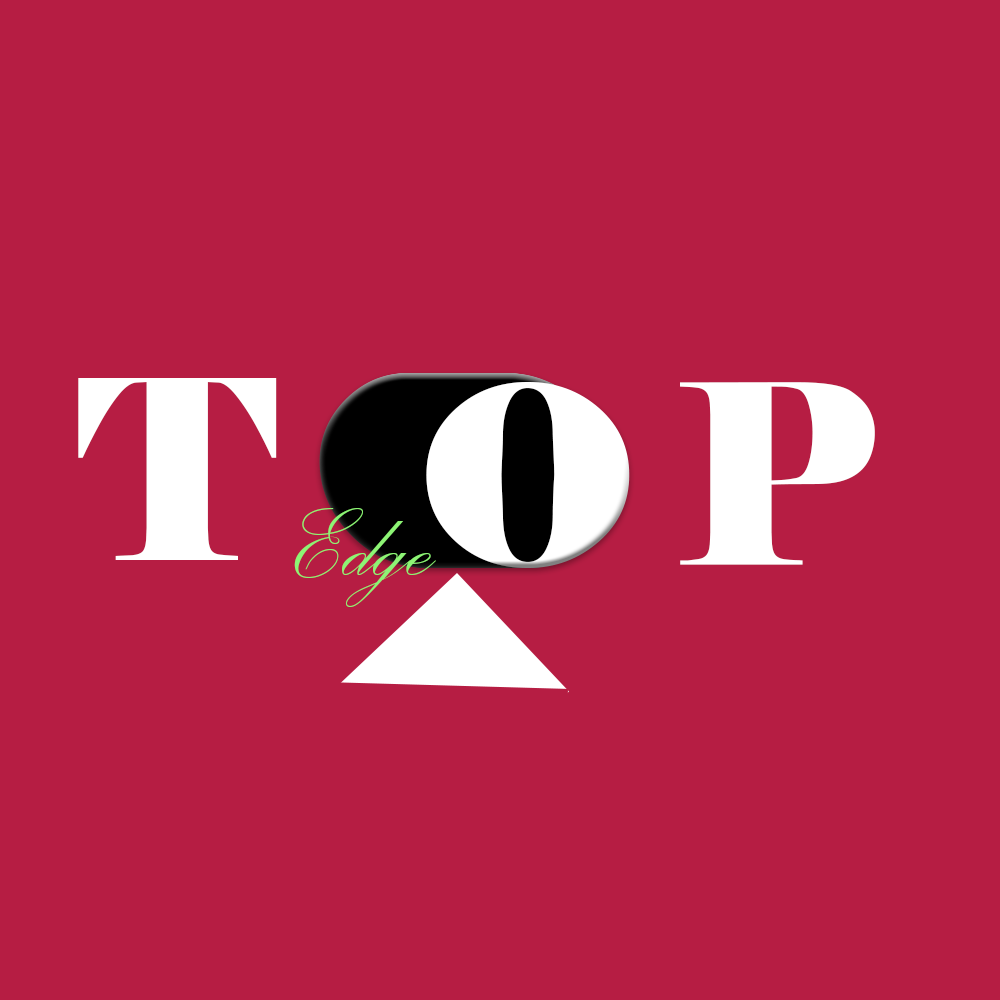
<style>
.page{position:relative;width:1000px;height:1000px;background:#b61d43}
.page>*{position:absolute;margin:0}
.t1{font:250px "Elephant-Regular";color:#ffffff}
.t2{font:125px "PalaceScriptMT";color:#8df475}
</style>
<div class="page">
<p class="t1" style="left:78px;top:378px;width:199px;height:182px">T</p>
<p class="t1" style="left:680px;top:382px;width:195px;height:183px">P</p>
<p class="t2" style="left:294px;top:508px;width:142px;height:99px">Edge</p>
</div>
